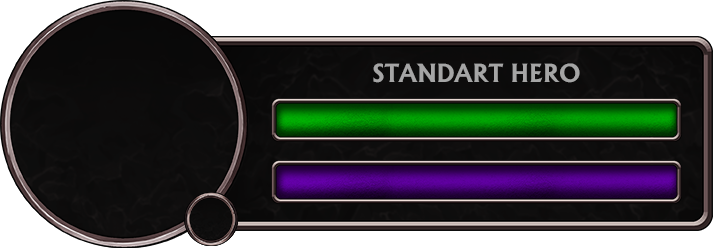
<style>
.page{position:relative;width:713px;height:248px}
.page>*{position:absolute;margin:0}
.t1{font:24px "AlbertusBold-Regular";color:#a5a5a5}
</style>
<div class="page">
<p class="t1" style="left:373px;top:63px;width:207px;height:20px">STANDART HERO</p>
</div>
